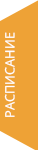
<style>
.page{position:relative;width:38px;height:150px;background:#eea236}
.page>*{position:absolute;margin:0}
.t1{font:13px "OpenSans";color:#ffffff}
</style>
<div class="page">
<p class="t1" style="left:4px;top:32px;width:11px;height:85px;rotate:-90deg">РАСПИСАНИЕ</p>
</div>
